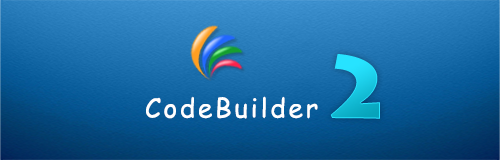
<style>
.page{position:relative;width:500px;height:160px}
.page>*{position:absolute;margin:0}
.t1{font:26.3px "ComicSansMS";letter-spacing:0.1em;color:#ffffff}
</style>
<div class="page">
<p class="t1" style="left:146px;top:96px;width:172px;height:23px">CodeBuilder</p>
</div>
